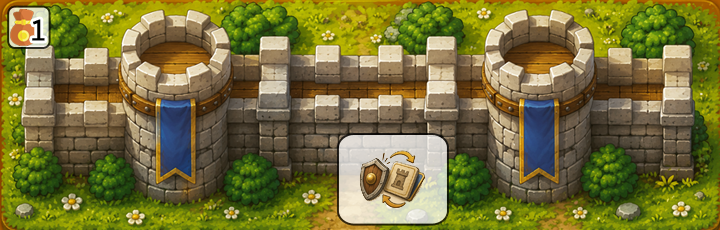
<style>
.page{position:relative;width:720px;height:230px}
.page>*{position:absolute;margin:0}
.t1{font:30px "OratorStd";letter-spacing:-0.05em;color:#000000;font-weight:bold}
</style>
<div class="page">
<p class="t1" style="left:32px;top:19px;width:13px;height:22px">1</p>
</div>
